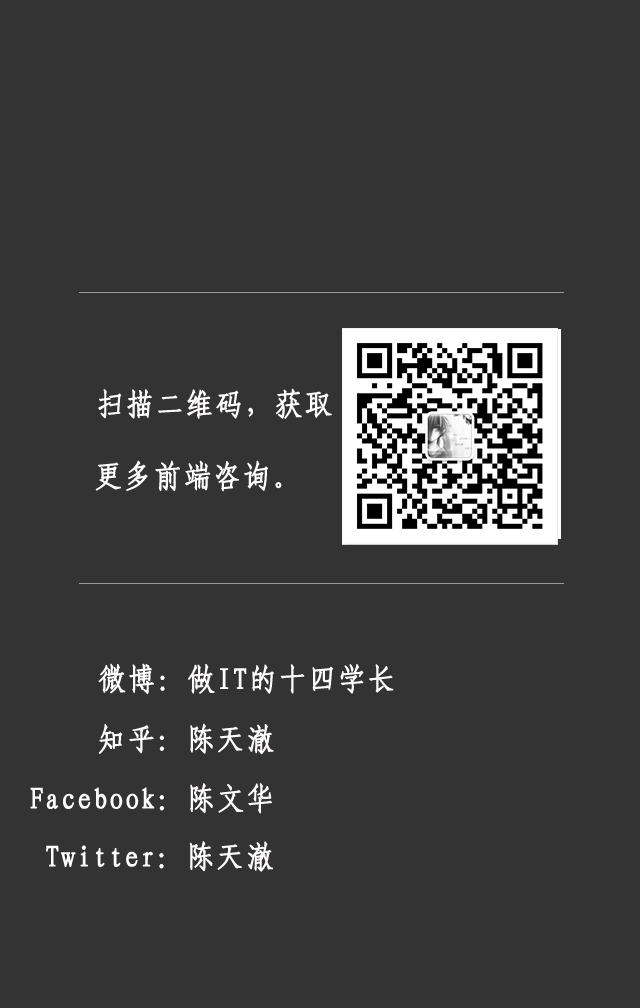
<style>
.page{position:relative;width:640px;height:1008px;background:#333333}
.page>*{position:absolute;margin:0}
.t1{font:30px "-G-s-u-n-0-0-m";letter-spacing:0.05em;color:#fefcfc;font-weight:bold;scale:0.92 1}
</style>
<div class="page">
<p class="t1" style="left:98px;top:388px;width:234px;height:31px">扫描二维码，获取</p>
<p class="t1" style="left:95px;top:460px;width:187px;height:32px">更多前端咨询。</p>
<p class="t1" style="left:98px;top:663px;width:296px;height:32px">微博：做IT的十四学长</p>
<p class="t1" style="left:98px;top:723px;width:176px;height:32px">知乎：陈天澈</p>
<p class="t1" style="left:30px;top:783px;width:242px;height:31px">Facebook：陈文华</p>
<p class="t1" style="left:46px;top:841px;width:227px;height:31px">Twitter：陈天澈</p>
</div>
